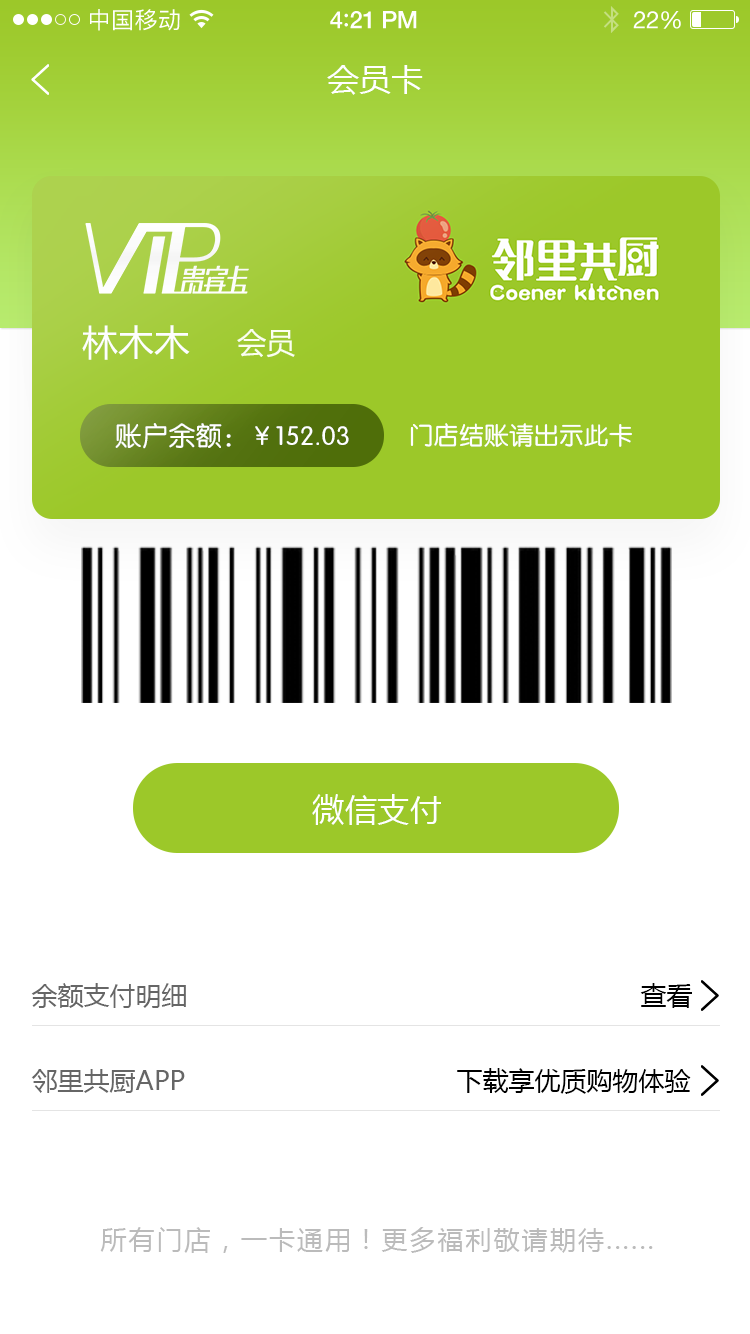
<style>
.page{position:relative;width:750px;height:1334px;background:#ffffff}
.page>*{position:absolute;margin:0}
.t1{font:23px "PingFangSC-Regular";letter-spacing:0.02em;color:#ffffff}
.t2{font:24px "HelveticaNeue-Medium";letter-spacing:-0.02em;color:#ffffff}
.t3{font:26px "Avenir-Medium";letter-spacing:-0.02em;color:#ffffff}
.t4{font:24px "HelveticaNeue";letter-spacing:-0.02em;color:#ffffff}
.t5{font:32px "MicrosoftYaHei";color:#ffffff;text-transform:uppercase}
.t6{font:36.1px "MicrosoftYaHei";color:#ffffff;text-transform:uppercase}
.t7{font:29.3px "MicrosoftYaHei";color:#fbffef;text-transform:uppercase}
.t8{font:26.2px "FZY3JW--GB1-0";letter-spacing:0.019em;color:#ffffff;text-transform:uppercase}
.t9{font:24.6px "FZY3JW--GB1-0";letter-spacing:0.019em;color:#ffffff;text-transform:uppercase}
.t10{font:32.4px "MicrosoftYaHei";color:#ffffff;text-transform:uppercase}
.t11{font:26px "MicrosoftYaHei";color:#666666;text-transform:uppercase}
.t12{font:26px "MicrosoftYaHei";color:#000000;text-transform:uppercase}
.t13{font:26px "MicrosoftYaHei";letter-spacing:0.08em;color:#bbbbbb;text-transform:uppercase}
</style>
<div class="page">
<p class="t1" style="left:90px;top:9px;width:90px;height:22px">中国移动</p>
<p class="t2" style="left:330px;top:11px;width:87px;height:18px">4<span class="t3">:</span>21 PM</p>
<p class="t4" style="left:633px;top:11px;width:48px;height:18px">22%</p>
<p class="t5" style="left:327px;top:65px;width:96px;height:30px">会员卡</p>
<p class="t6" style="left:82px;top:325px;width:108px;height:35px">林木木</p>
<p class="t7" style="left:237px;top:329px;width:58px;height:29px">会员</p>
<p class="t8" style="left:115px;top:423px;width:234px;height:26px">账户余额：￥152.03</p>
<p class="t9" style="left:410px;top:423px;width:222px;height:24px">门店结账请出示此卡</p>
<p class="t10" style="left:312px;top:794px;width:129px;height:31px">微信支付</p>
<p class="t11" style="left:31px;top:983px;width:155px;height:25px">余额支付明细</p>
<p class="t12" style="left:640px;top:983px;width:52px;height:25px">查看</p>
<p class="t11" style="left:31px;top:1069px;width:154px;height:24px">邻里共厨APP</p>
<p class="t12" style="left:457px;top:1068px;width:234px;height:26px">下载享优质购物体验</p>
<p class="t13" style="left:100px;top:1227px;width:553px;height:26px">所有门店，一卡通用！更多福利敬请期待......</p>
</div>
